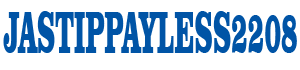
<style>
.page{position:relative;width:300px;height:70px;background:#ffffff}
.page>*{position:absolute;margin:0}
.t1{font:60.4px "ClarendonBT-Black";color:#0054a6;scale:0.43 1}
</style>
<div class="page">
<p class="t1" style="left:3px;top:11px;width:294px;height:42px">JASTIPPAYLESS2208</p>
</div>
